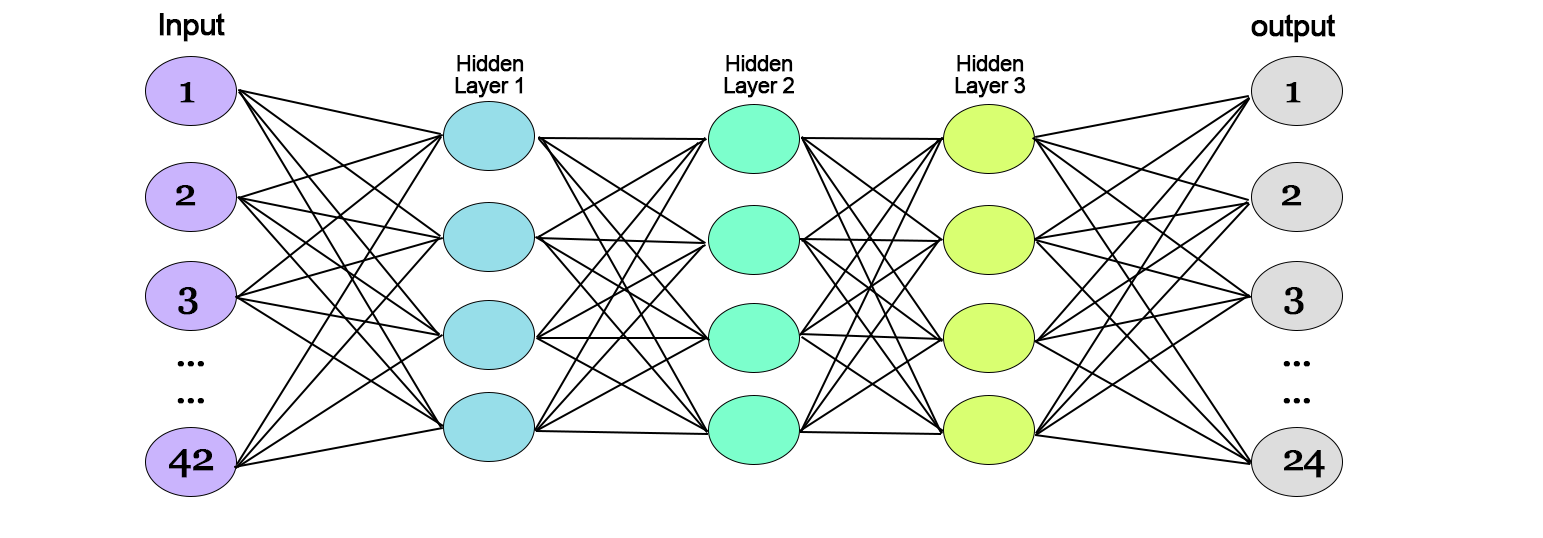
<style>
.page{position:relative;width:1543px;height:538px;background:#ffffff}
.page>*{position:absolute;margin:0}
.t1{font:31px "ArialMT";letter-spacing:-0.04em;color:#000000;font-weight:bold}
.t2{font:22px/22px "ArialMT";letter-spacing:-0.04em;color:#000000;font-weight:bold}
.t3{font:38.9px "Georgia";letter-spacing:-0.04em;color:#000000;font-weight:bold}
.t4{font:38.9px/37px "Georgia";letter-spacing:-0.04em;color:#000000;font-weight:bold}
.t5{font:41.3px "Georgia";letter-spacing:-0.04em;color:#000000;font-weight:bold}
</style>
<div class="page">
<p class="t1" style="left:159px;top:13px;width:66px;height:29px">Input</p>
<p class="t1" style="left:1251px;top:14px;width:85px;height:29px">output</p>
<p class="t2" style="left:455px;top:55px;width:69px;height:43px;text-align:center">Hidden<br>Layer 1</p>
<p class="t2" style="left:724px;top:55px;width:70px;height:43px;text-align:center">Hidden<br>Layer 2</p>
<p class="t2" style="left:955px;top:55px;width:71px;height:43px;text-align:center">Hidden<br>Layer 3</p>
<p class="t3" style="left:180px;top:82px;width:15px;height:21px">1</p>
<p class="t3" style="left:1286px;top:82px;width:15px;height:21px">1</p>
<p class="t3" style="left:176px;top:185px;width:20px;height:21px">2</p>
<p class="t3" style="left:1282px;top:185px;width:20px;height:21px">2</p>
<p class="t3" style="left:178px;top:287px;width:20px;height:28px">3</p>
<p class="t3" style="left:1284px;top:287px;width:20px;height:28px">3</p>
<p class="t4" style="left:177px;top:361px;width:27px;height:43px;text-align:center">...<br>...</p>
<p class="t4" style="left:1283px;top:361px;width:27px;height:43px;text-align:center">...<br>...</p>
<p class="t5" style="left:169px;top:449px;width:45px;height:29px">42</p>
<p class="t3" style="left:1284px;top:450px;width:41px;height:28px">24</p>
</div>
